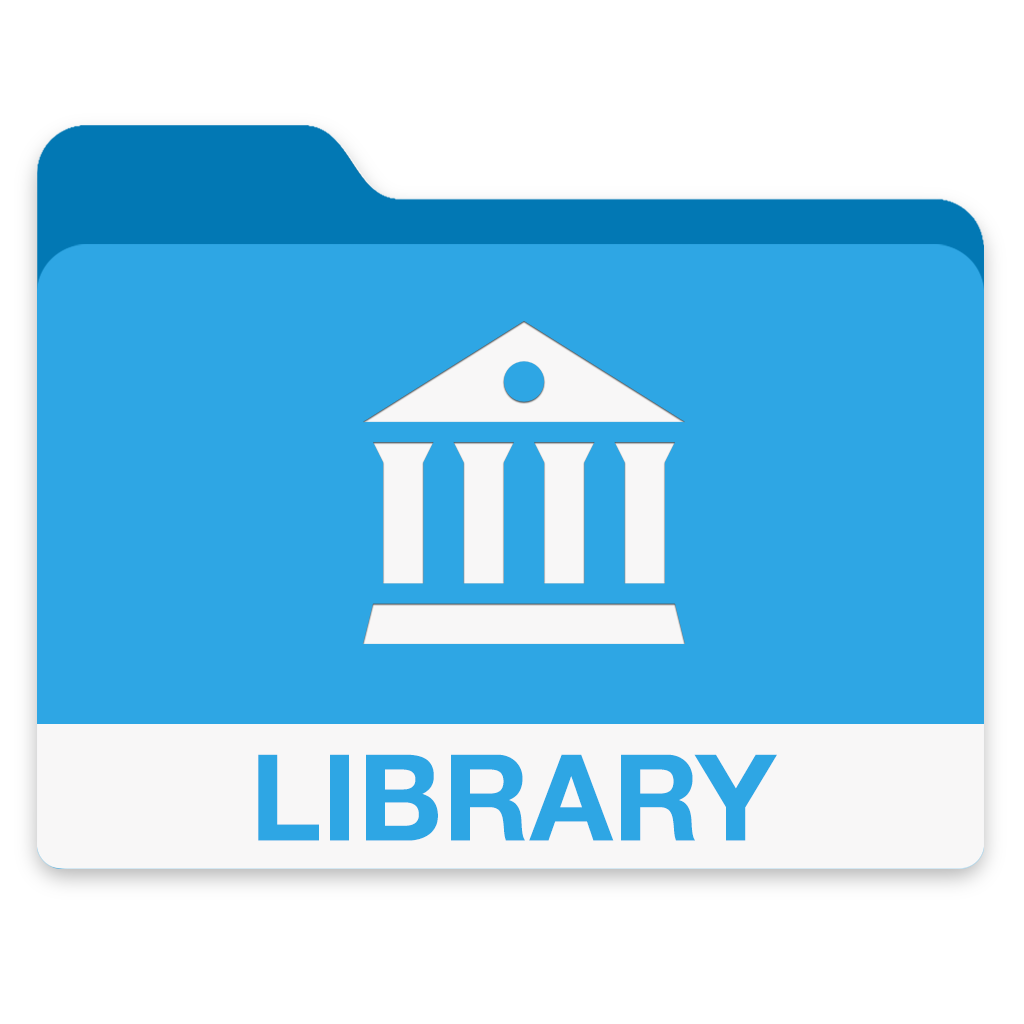
<style>
.page{position:relative;width:1024px;height:1024px;background:#2ea6e4}
.page>*{position:absolute;margin:0}
.t1{font:120px "HelveticaNeue-Bold";letter-spacing:0.005em;color:#2ea6e4}
</style>
<div class="page">
<p class="t1" style="left:258px;top:754px;width:519px;height:87px">LIBRARY</p>
</div>
